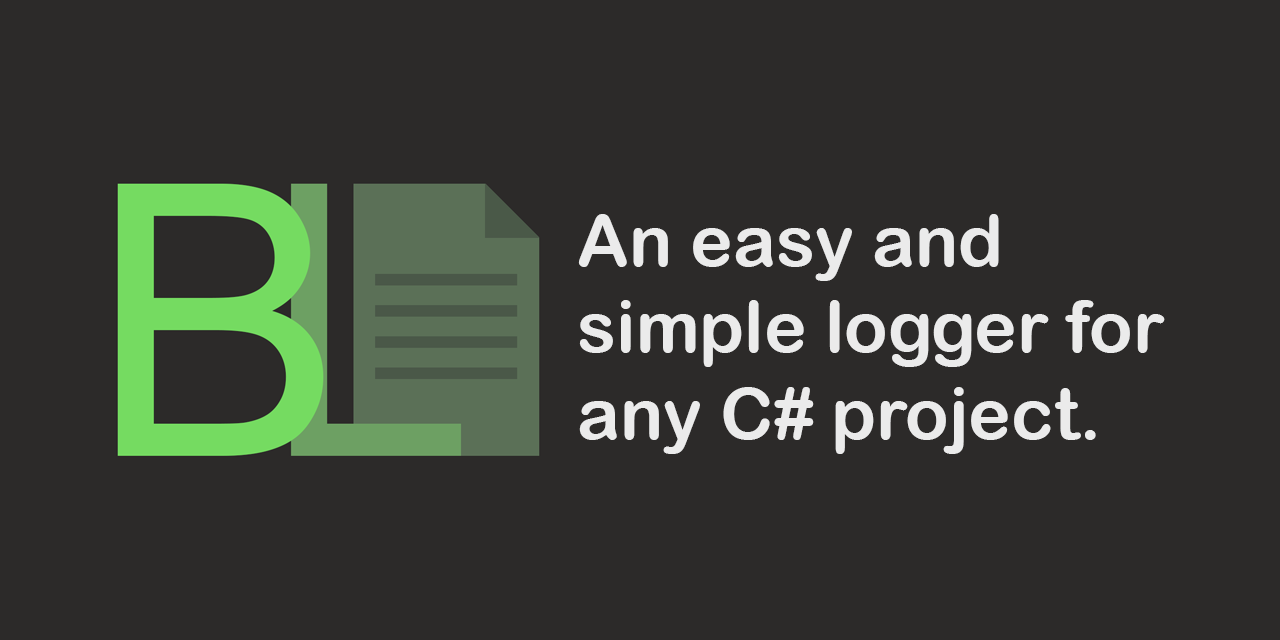
<style>
.page{position:relative;width:1280px;height:640px;background:#2c2a29}
.page>*{position:absolute;margin:0}
.t1{font:72px "ArialRoundedMTBold";color:#ebebeb}
</style>
<div class="page">
<p class="t1" style="left:578px;top:214px;width:587px;height:240px">An easy and<br>simple logger for<br>any C# project.</p>
</div>
